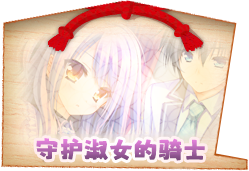
<style>
.page{position:relative;width:249px;height:171px}
.page>*{position:absolute;margin:0}
.t1{font:24px "MaokenAssortedSans";font-weight:bold}
</style>
<div class="page">
<p class="t1" style="left:36px;top:138px;width:169px;height:23px">守护淑女的骑士</p>
</div>
